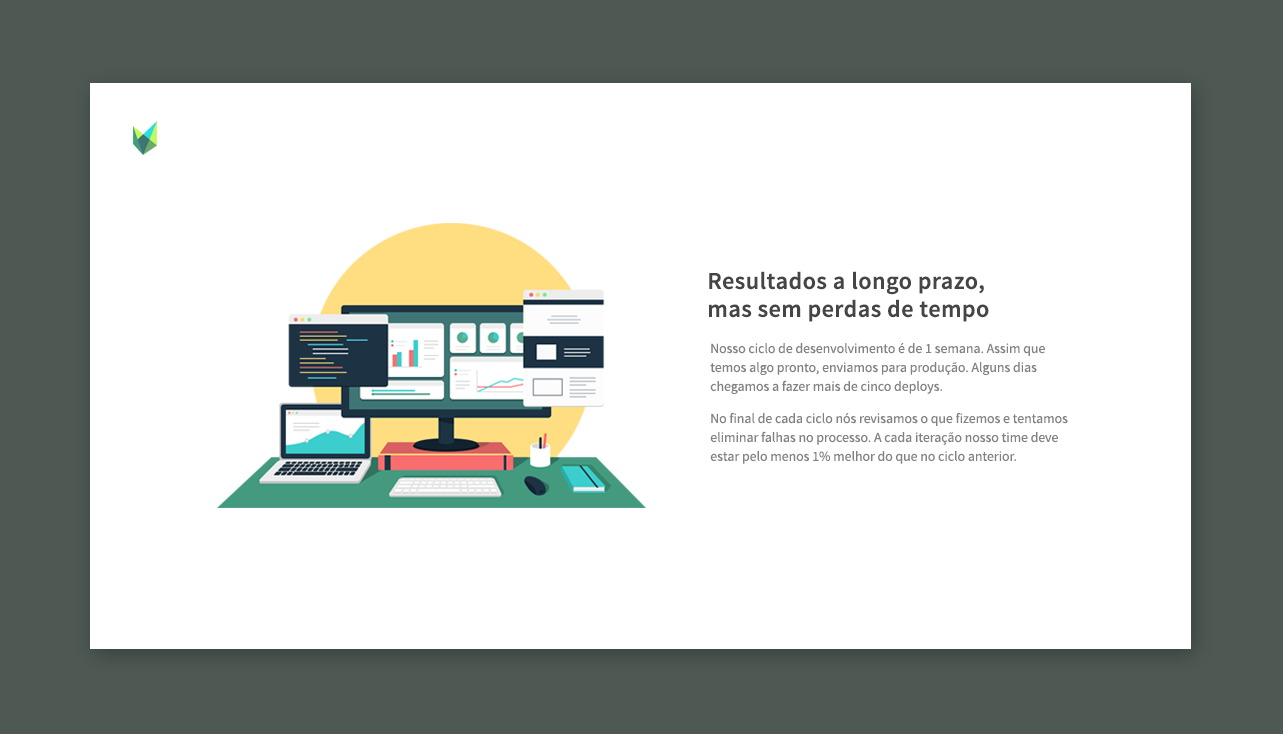
<style>
.page{position:relative;width:1283px;height:734px;background:#ffffff}
.page>*{position:absolute;margin:0}
.t1{font:24.1px/27.9px "SourceSansPro-Semibold";letter-spacing:0.02em;color:#454545}
.t2{font:13.8px/18.9px "SourceSansPro-Regular";color:#828282}
</style>
<div class="page">
<p class="t1" style="left:709px;top:271px;width:280px;height:51px">Resultados a longo prazo,<br>mas sem perdas de tempo</p>
<p class="t2" style="left:710px;top:343px;width:335px;height:51px">Nosso ciclo de desenvolvimento é de 1 semana. Assim que<br>temos algo pronto, enviamos para produção. Alguns dias<br>chegamos a fazer mais de cinco deploys.</p>
<p class="t2" style="left:710px;top:412px;width:358px;height:52px">No final de cada ciclo nós revisamos o que fizemos e tentamos<br>eliminar falhas no processo. A cada iteração nosso time deve<br>estar pelo menos 1% melhor do que no ciclo anterior.</p>
</div>
